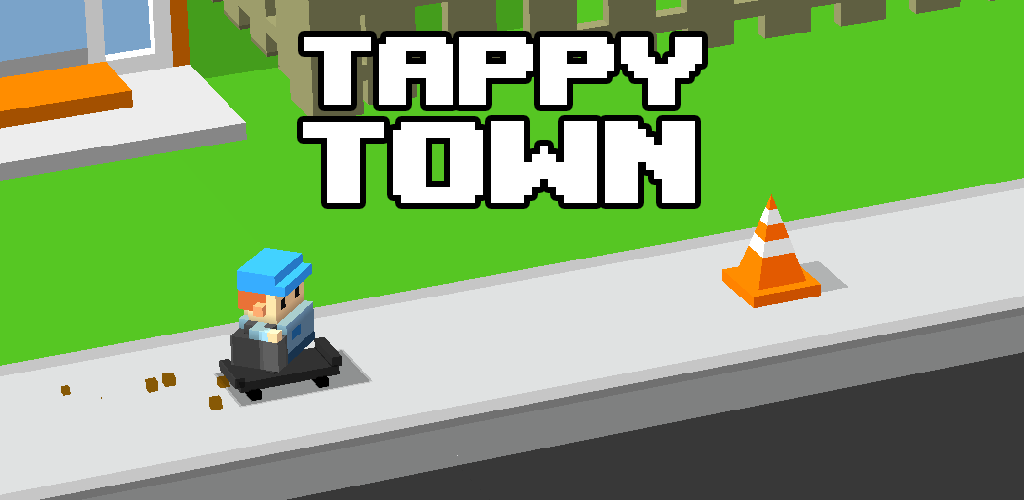
<style>
.page{position:relative;width:1024px;height:500px;background:#56c623}
.page>*{position:absolute;margin:0}
.t1{font:134.7px "UpheavalPro-Regular";color:#ffffff}
.t2{font:163.2px "UpheavalPro-Regular";color:#ffffff}
</style>
<div class="page">
<p class="t1" style="left:304px;top:37px;width:398px;height:68px">TAPPY</p>
<p class="t2" style="left:303px;top:121px;width:392px;height:82px">TOWN</p>
</div>
